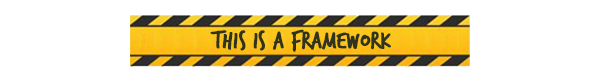
<style>
.page{position:relative;width:600px;height:82px;background:#ffffff}
.page>*{position:absolute;margin:0}
.t1{font:25.7px "TrashHand";color:#30341f;font-weight:bold}
</style>
<div class="page">
<p class="t1" style="left:210px;top:29px;width:181px;height:23px">This is a framework</p>
</div>
